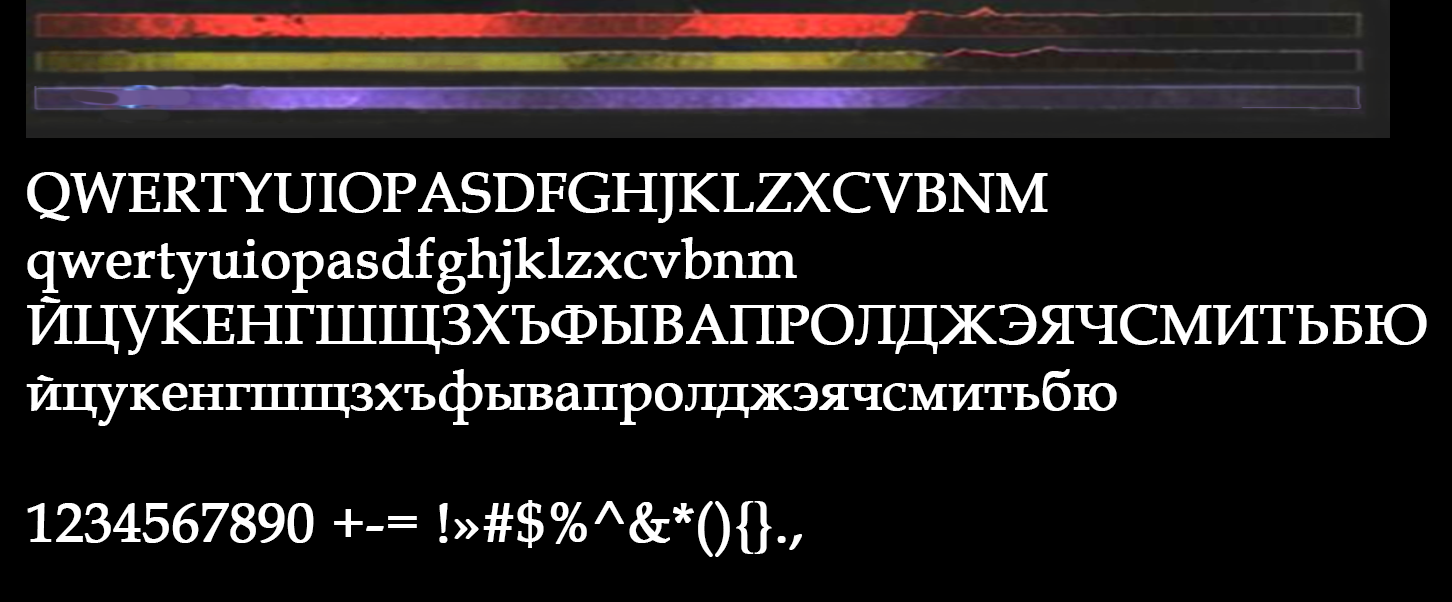
<style>
.page{position:relative;width:1452px;height:602px;background:#000000}
.page>*{position:absolute;margin:0}
.t1{font:55px "BookAntiqua";color:#ffffff;font-weight:bold}
</style>
<div class="page">
<p class="t1" style="left:26px;top:172px;width:1401px;height:385px">QWERTYUIOPASDFGHJKLZXCVBNM<br>qwertyuiopasdfghjklzxcvbnm<br>ЙЦУКЕНГШЩЗХЪФЫВАПРОЛДЖЭЯЧСМИТЬБЮ<br>йцукенгшщзхъфывапролджэячсмитьбю<br><br>1234567890 +-= !»#$%^&amp;*(){}.,</p>
</div>
